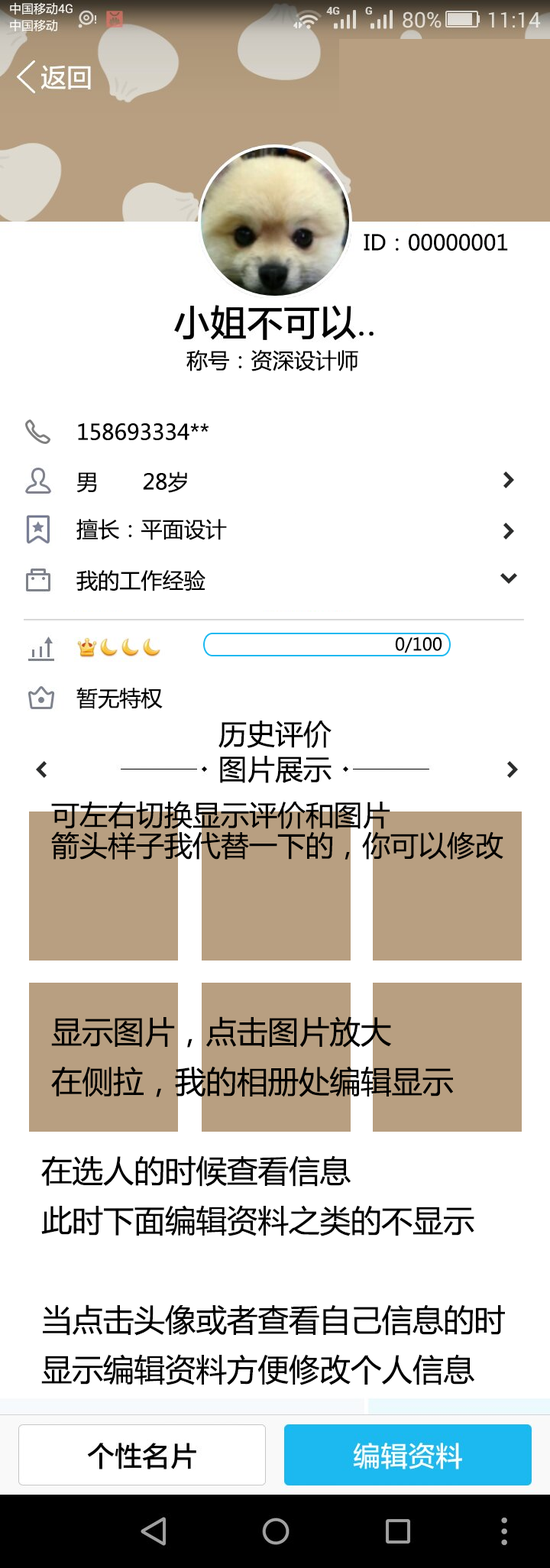
<style>
.page{position:relative;width:550px;height:1568px;background:#ffffff}
.page>*{position:absolute;margin:0}
.t1{font:21.5px "MicrosoftYaHei";color:#000000}
.t2{font:17.2px "MicrosoftYaHei";color:#000000}
.t3{font:28.2px "MicrosoftYaHei";color:#000000}
.t4{font:28.2px/30.6px "MicrosoftYaHei";color:#000000}
.t5{font:30.9px/49.7px "MicrosoftYaHei";color:#000000}
.t6{font:30.9px/87.8px "MicrosoftYaHei";color:#000000}
</style>
<div class="page">
<p class="t1" style="left:364px;top:233px;width:144px;height:18px">ID：00000001</p>
<p class="t1" style="left:186px;top:349px;width:172px;height:22px">称号：资深设计师</p>
<p class="t1" style="left:78px;top:423px;width:131px;height:17px">158693334**</p>
<p class="t1" style="left:76px;top:471px;width:111px;height:22px">男       28岁</p>
<p class="t1" style="left:76px;top:519px;width:151px;height:21px">擅长：平面设计</p>
<p class="t1" style="left:76px;top:570px;width:130px;height:21px">我的工作经验</p>
<p class="t2" style="left:395px;top:637px;width:47px;height:16px">0/100</p>
<p class="t1" style="left:76px;top:687px;width:87px;height:22px">暂无特权</p>
<p class="t3" style="left:219px;top:721px;width:113px;height:27px">历史评价</p>
<p class="t3" style="left:220px;top:756px;width:112px;height:27px">图片展示</p>
<p class="t4" style="left:51px;top:801px;width:453px;height:59px">可左右切换显示评价和图片<br>箭头样子我代替一下的，你可以修改</p>
<p class="t5" style="left:51px;top:1016px;width:402px;height:81px"><span class="t6">显示图片，</span>点击图片放大<br>在侧拉，我的相册处编辑显示</p>
<p class="t5" style="left:41px;top:1155px;width:464px;height:230px">在选人的时候查看信息<br>此时下面编辑资料之类的不显示<br><br>当点击头像或者查看自己信息的时<br>显示编辑资料方便修改个人信息</p>
</div>
